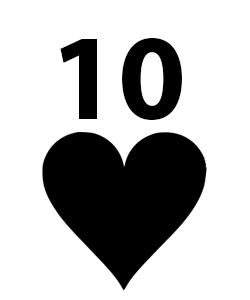
<style>
.page{position:relative;width:250px;height:300px;background:#ffffff}
.page>*{position:absolute;margin:0}
.t1{font:123.3px "MyriadPro-Bold";color:#000000}
</style>
<div class="page">
<p class="t1" style="left:60px;top:38px;width:122px;height:83px">10</p>
</div>
